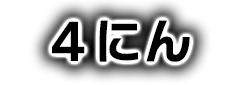
<style>
.page{position:relative;width:230px;height:85px;background:#ffffff}
.page>*{position:absolute;margin:0}
.t1{font:50px "NitalagoRuika-06";color:#000000}
</style>
<div class="page">
<p class="t1" style="left:52px;top:20px;width:138px;height:42px">４にん</p>
</div>
